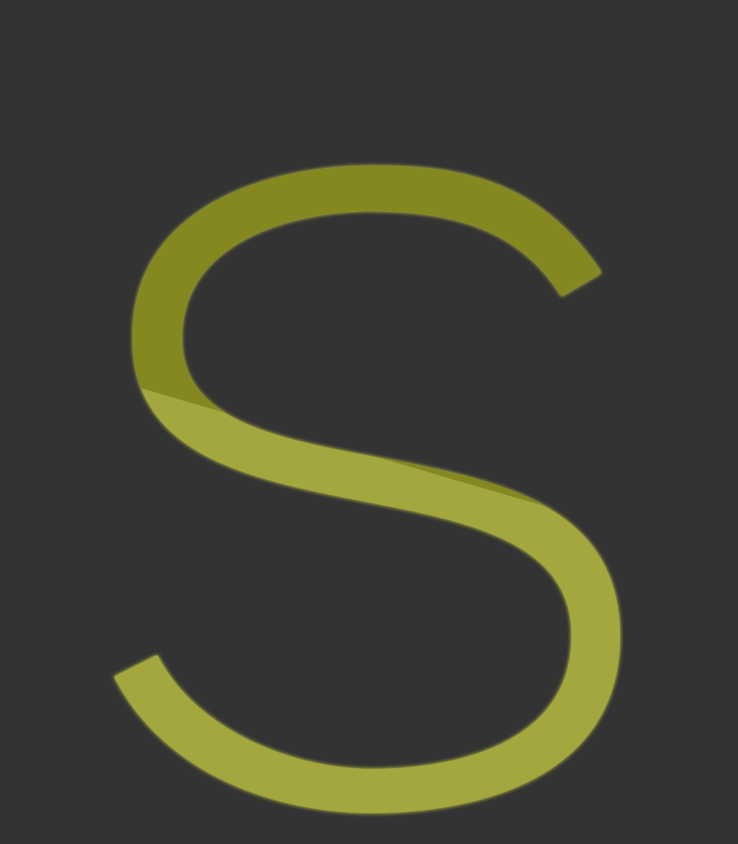
<style>
.page{position:relative;width:738px;height:844px;background:#333333}
.page>*{position:absolute;margin:0}
.t1{font:897.6px "NexaLight"}
</style>
<div class="page">
<p class="t1" style="left:114px;top:165px;width:506px;height:648px">S</p>
</div>
